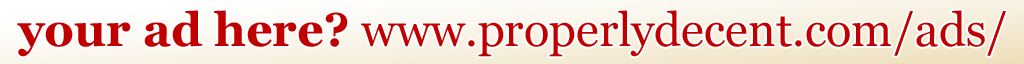
<style>
.page{position:relative;width:1024px;height:64px}
.page>*{position:absolute;margin:0}
.t1{font:47px "Georgia";color:#c00000}
.t2{font:47px "Georgia-Bold";color:#c00000}
</style>
<div class="page">
<p class="t1" style="left:17px;top:10px;width:989px;height:47px"><span class="t2">your ad here?</span> www.properlydecent.com/ads/</p>
</div>
